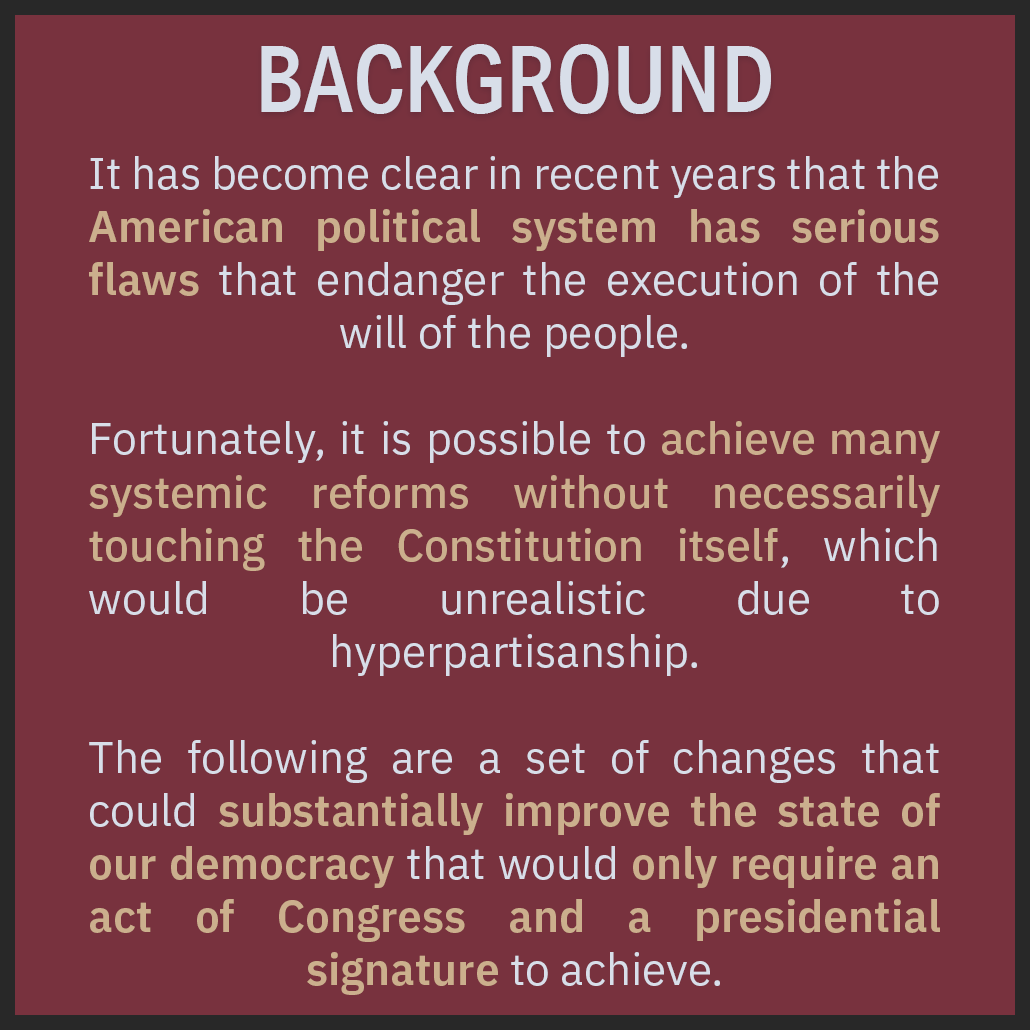
<style>
.page{position:relative;width:1030px;height:1030px;background:#78323e}
.page>*{position:absolute;margin:0}
.t1{font:92.1px "AktivGroteskCd-Medium";color:#d8dee9}
.t2{font:44.2px "IBMPlexSans";color:#d8dee9}
.t3{font:44.2px "IBMPlexSans-SemiBold";color:#cbaf8d}
.t4{font:44.2px "IBMPlexSans-Medium";color:#cbaf8d}
</style>
<div class="page">
<p class="t1" style="left:261px;top:44px;width:510px;height:70px">BACKGROUND</p>
<p class="t2" style="left:89px;top:156px;width:851px;height:839px;text-align:justify">It has become clear in recent years that the <span class="t3">American political system has serious flaws</span> that endanger the execution of the will of the people.<br><br>Fortunately, it is possible to <span class="t4">achieve many systemic reforms without necessarily touching the Constitution itself</span>, which would be unrealistic due to hyperpartisanship.<br><br>The following are a set of changes that could <span class="t3">substantially improve the state of our democracy</span> that would <span class="t3">only require an act of Congress and a presidential signature</span> to achieve.</p>
</div>
